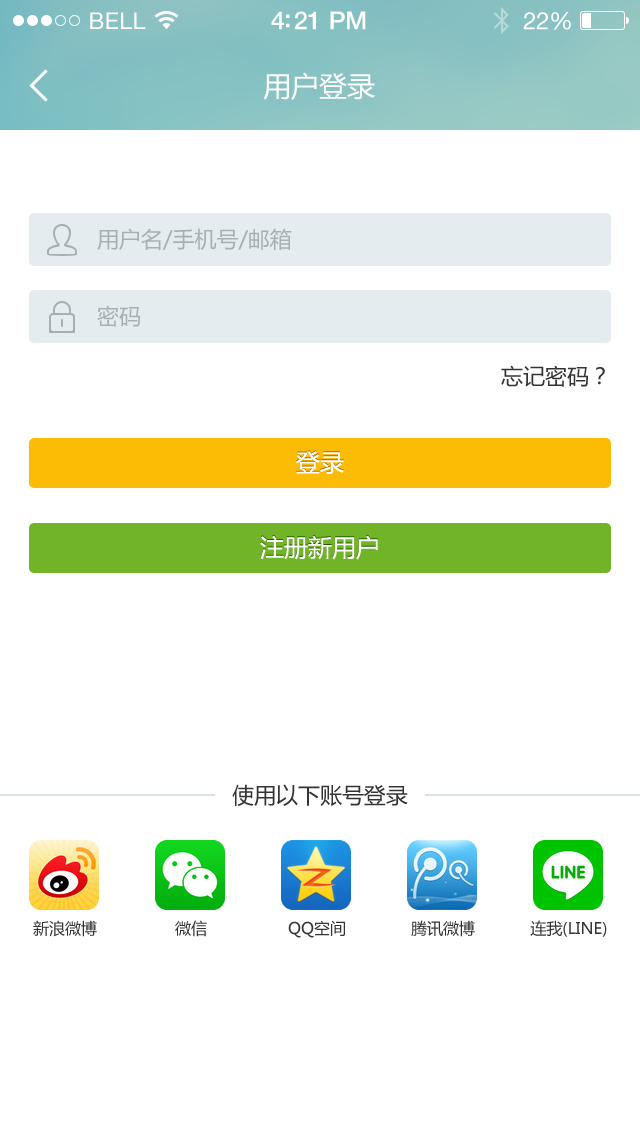
<style>
.page{position:relative;width:640px;height:1136px;background:#ffffff}
.page>*{position:absolute;margin:0}
.t1{font:23px "HelveticaNeue";letter-spacing:0.02em;color:#ffffff}
.t2{font:25px "HelveticaNeue-Medium";letter-spacing:-0.02em;color:#ffffff}
.t3{font:24px "HelveticaNeue";letter-spacing:-0.02em;color:#ffffff}
.t4{font:28px "MicrosoftYaHei";color:#ffffff}
.t5{font:22px "MicrosoftYaHei";color:#a7afb2}
.t6{font:22px "MicrosoftYaHei";color:#333333}
.t7{font:24px "MicrosoftYaHei";color:#ffffff}
.t8{font:16px "MicrosoftYaHei";color:#333333}
</style>
<div class="page">
<p class="t1" style="left:90px;top:12px;width:56px;height:17px">BELL</p>
<p class="t2" style="left:271px;top:11px;width:95px;height:19px">4:21 PM</p>
<p class="t3" style="left:523px;top:12px;width:48px;height:18px">22%</p>
<p class="t4" style="left:263px;top:72px;width:112px;height:28px">用户登录</p>
<p class="t5" style="left:97px;top:228px;width:195px;height:22px">用户名/手机号/邮箱</p>
<p class="t5" style="left:97px;top:305px;width:43px;height:22px">密码</p>
<p class="t6" style="left:501px;top:365px;width:104px;height:22px">忘记密码？</p>
<p class="t7" style="left:296px;top:451px;width:48px;height:23px">登录</p>
<p class="t7" style="left:260px;top:535px;width:118px;height:25px">注册新用户</p>
<p class="t6" style="left:232px;top:784px;width:176px;height:22px">使用以下账号登录</p>
<p class="t8" style="left:33px;top:920px;width:64px;height:17px">新浪微博</p>
<p class="t8" style="left:175px;top:920px;width:32px;height:17px">微信</p>
<p class="t8" style="left:288px;top:920px;width:57px;height:18px">QQ空间</p>
<p class="t8" style="left:411px;top:920px;width:64px;height:17px">腾讯微博</p>
<p class="t8" style="left:530px;top:920px;width:77px;height:17px">连我(LINE)</p>
</div>
